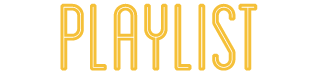
<style>
.page{position:relative;width:320px;height:75px;background:#ffffff}
.page>*{position:absolute;margin:0}
.t1{font:100px "Blanch-CondensedInline";color:#f5c038}
</style>
<div class="page">
<p class="t1" style="left:60px;top:3px;width:198px;height:68px">Playlist</p>
</div>
